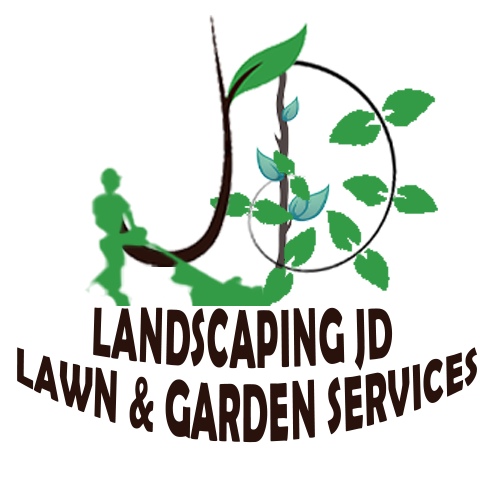
<style>
.page{position:relative;width:500px;height:500px;background:#ffffff}
.page>*{position:absolute;margin:0}
.t1{font:48.3px/42.3px "BerlinSansFBDemi-Bold";letter-spacing:0.02em;color:#29120c;scale:0.74 1}
</style>
<div class="page">
<p class="t1" style="left:17px;top:307px;width:460px;height:136px;text-align:center">LANDSCAPING JD <br>LAWN &amp; GARDEN SERVICES</p>
</div>
